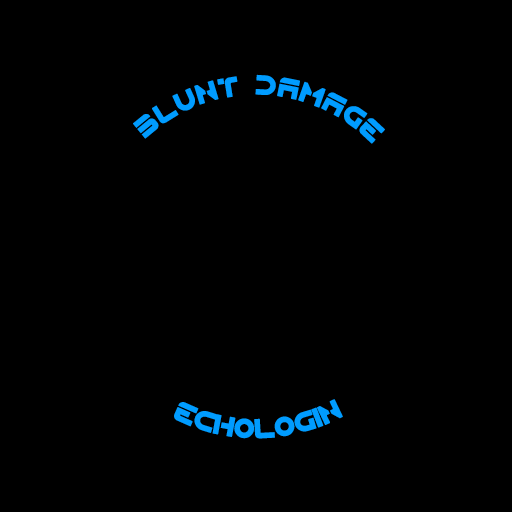
<style>
.page{position:relative;width:512px;height:512px;background:#000000}
.page>*{position:absolute;margin:0}
.t1{font:36px "Flynn";color:#009cff}
</style>
<div class="page">
<p class="t1" style="left:133px;top:74px;width:252px;height:70px;text-align:right">blunt damage</p>
<p class="t1" style="left:174px;top:399px;width:169px;height:40px">echologin</p>
</div>
